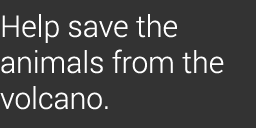
<style>
.page{position:relative;width:256px;height:128px;background:#333333}
.page>*{position:absolute;margin:0}
.t1{font:30px "Roboto-Light";color:#ffffff}
</style>
<div class="page">
<p class="t1" style="left:0px;top:14px;width:224px;height:96px">Help save the <br>animals from the volcano.</p>
</div>
